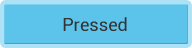
<style>
.page{position:relative;width:192px;height:48px;background:#5cc4ea}
.page>*{position:absolute;margin:0}
.t1{font:18px "Roboto-Regular";color:#333333}
</style>
<div class="page">
<p class="t1" style="left:63px;top:17px;width:64px;height:14px">Pressed</p>
</div>
